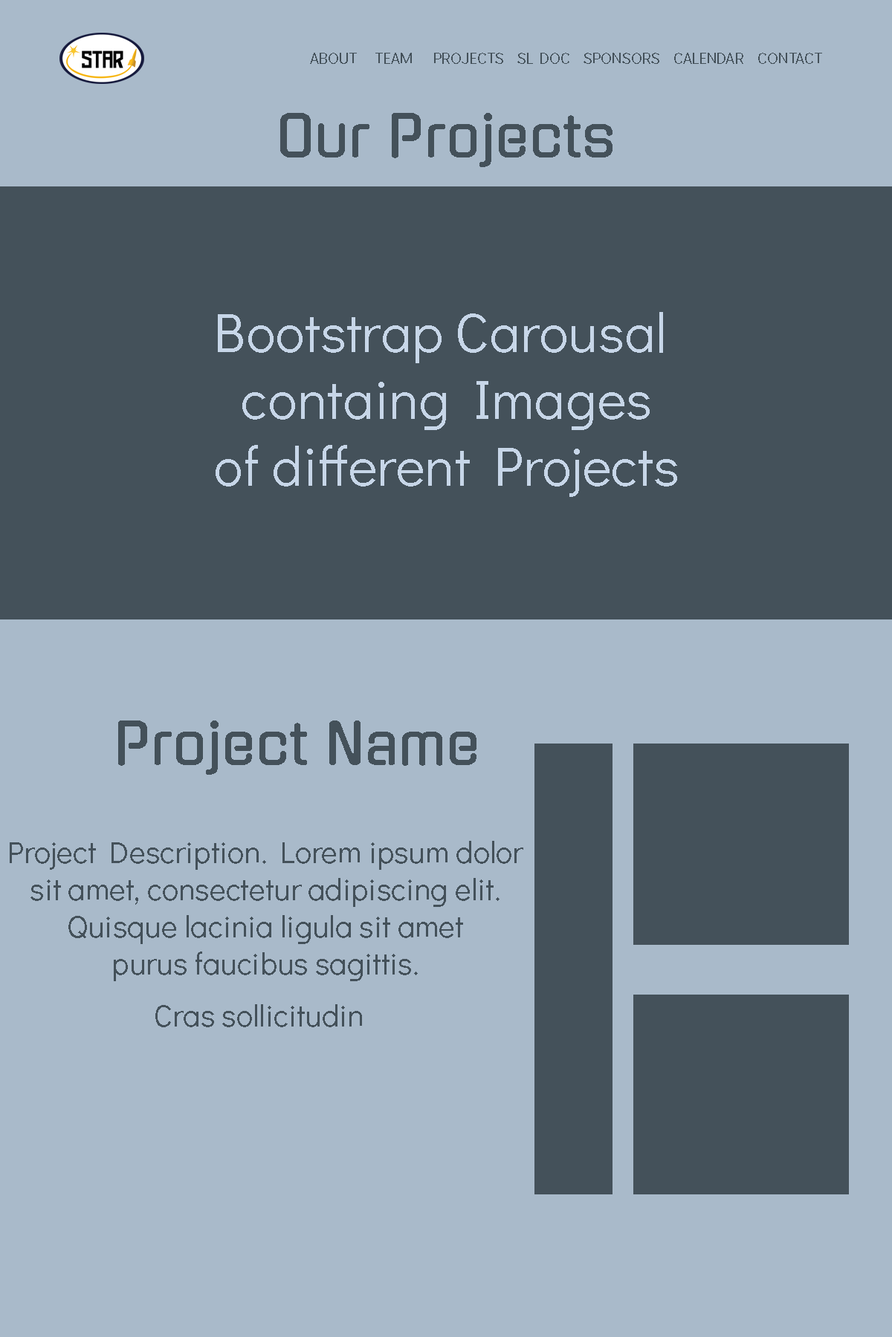
<style>
.page{position:relative;width:892px;height:1337px;background:#a9baca}
.page>*{position:absolute;margin:0}
.t1{font:15.5px "DidactGothic-Regular";color:#44515a}
.t2{font:55.7px "Gugi-Regular";color:#44515a}
.t3{font:55.7px "DidactGothic-Regular";color:#c7d6e8}
.t4{font:31px "DidactGothic-Regular";color:#44515a}
</style>
<div class="page">
<p class="t1" style="left:310px;top:53px;width:512px;height:11px">ABOUT     TEAM     PROJECTS    SL DOC    SPONSORS    CALENDAR    CONTACT</p>
<p class="t2" style="left:280px;top:113px;width:332px;height:54px">Our Projects</p>
<p class="t3" style="left:215px;top:312px;width:462px;height:185px;text-align:center">Bootstrap Carousal <br>containg Images<br>of different Projects</p>
<p class="t2" style="left:118px;top:721px;width:358px;height:54px">Project Name</p>
<p class="t4" style="left:10px;top:841px;width:513px;height:187px;text-align:center">Project Description. Lorem ipsum dolor <br>sit amet, consectetur adipiscing elit. <br>Quisque lacinia ligula sit amet <br>purus faucibus sagittis. <br>Cras sollicitudin</p>
</div>
